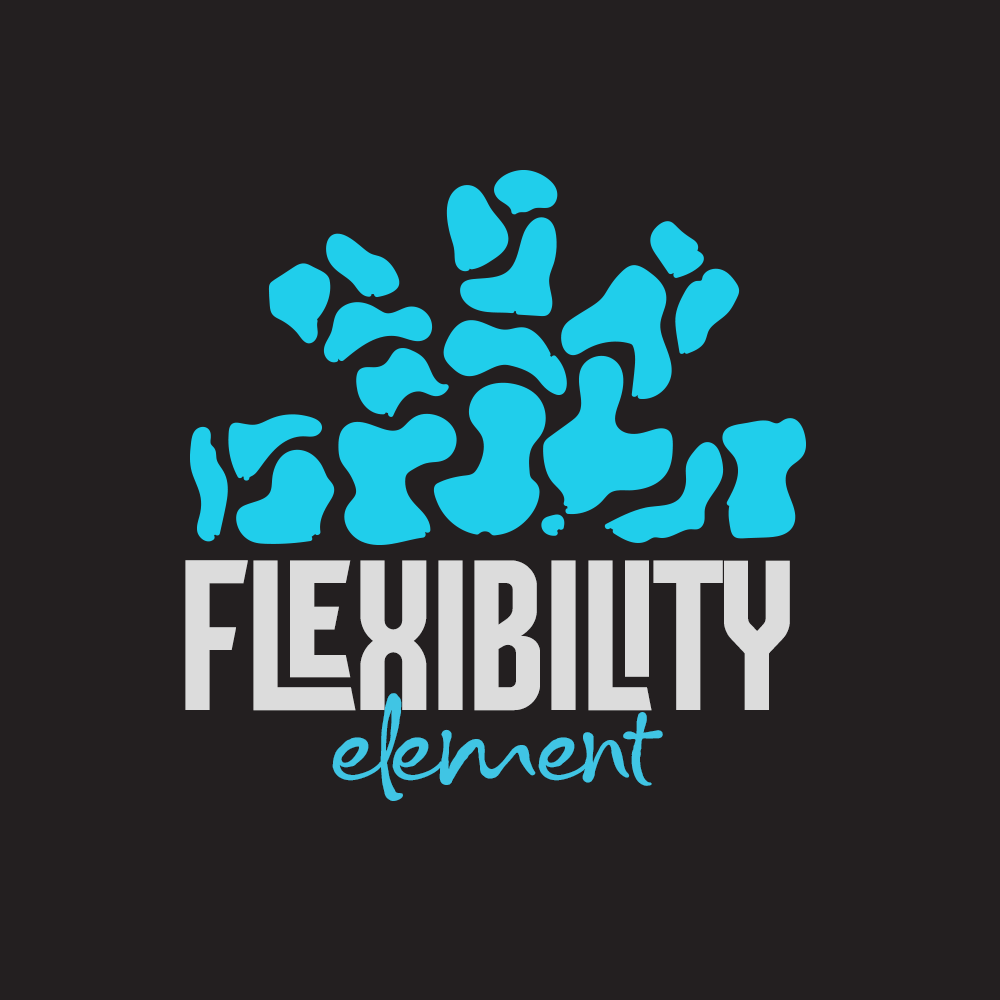
<style>
.page{position:relative;width:1000px;height:1000px;background:#231f20}
.page>*{position:absolute;margin:0}
.t1{font:213.9px "MogaRegular";color:#dcdcdc;text-transform:uppercase}
.t2{font:86.4px "SelfWrittenDemo-Regular";color:#40c5e4}
</style>
<div class="page">
<p class="t1" style="left:185px;top:560px;width:605px;height:151px">Flexibility</p>
<p class="t2" style="left:332px;top:693px;width:331px;height:108px">element</p>
</div>
